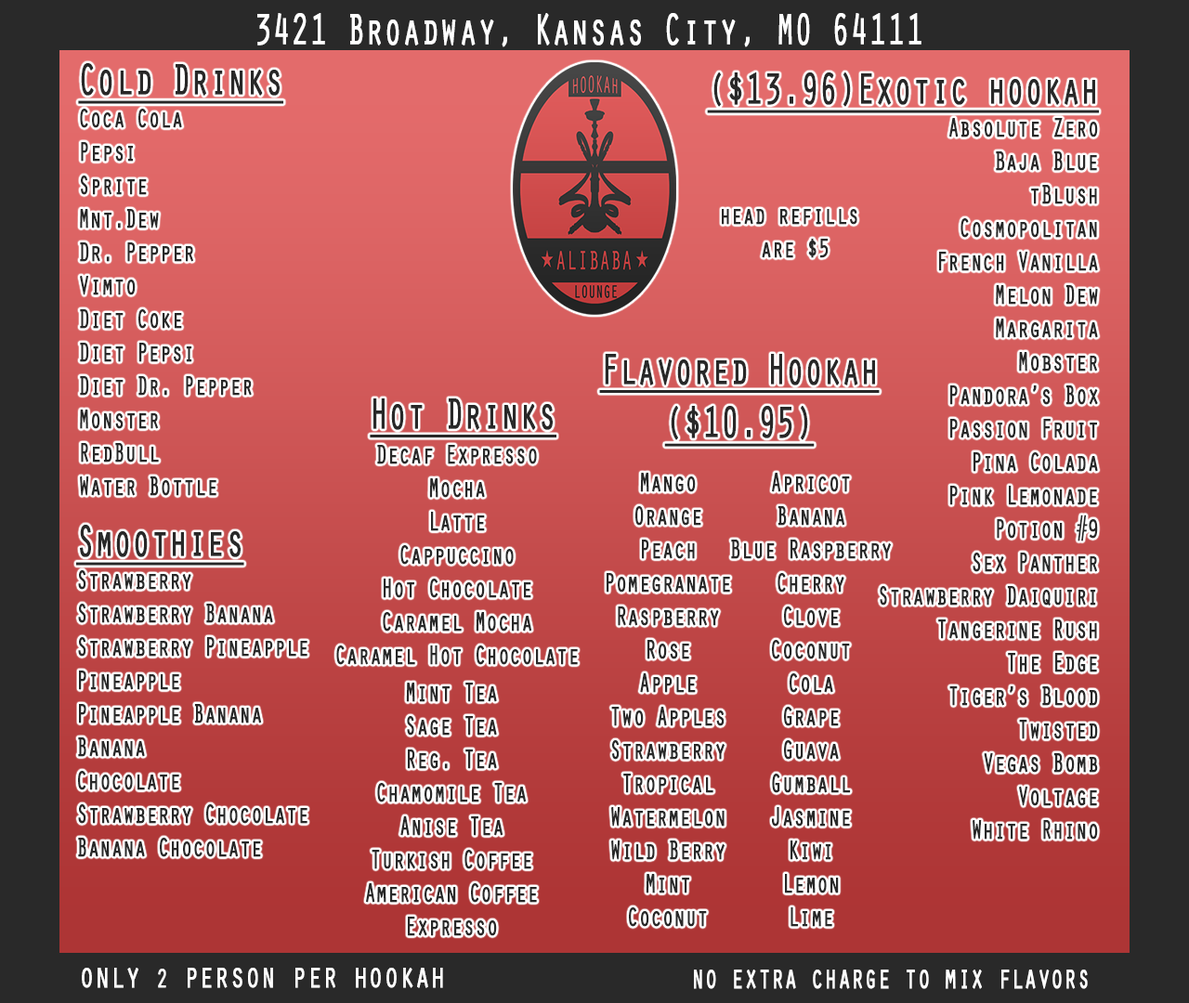
<style>
.page{position:relative;width:1189px;height:1003px}
.page>*{position:absolute;margin:0}
.t1{font:44.6px "OratorStd";color:#ffffff;font-weight:bold;scale:0.67 1}
.t2{font:27.9px "OratorStd";color:#282828;font-weight:bold;scale:0.67 1}
.t3{font:44.6px "OratorStd";color:#282828;font-weight:bold;text-decoration:underline;scale:0.67 1}
.t4{font:36.6px "OratorStd";color:#ffffff;font-weight:bold;scale:0.67 1}
.t5{font:27.9px "OratorStd";color:#ffffff;font-weight:bold;scale:0.67 1}
.t6{font:34.6px "OratorStd";color:#ffffff;font-weight:bold;scale:0.61 1}
</style>
<div class="page">
<p class="t1" style="left:257px;top:13px;width:664px;height:34px">3421 Broadway, Kansas City, MO 64111</p>
<p class="t2" style="left:78px;top:63px;width:206px;height:433px;text-align:right"><span class="t3">Cold Drinks<br></span>Coca Cola<br>Pepsi<br>Sprite<br>Mnt.Dew<br>Dr. Pepper<br>Vimto<br>Diet Coke<br>Diet Pepsi<br>Diet Dr. Pepper<br>Monster<br>RedBull<br>Water Bottle</p>
<p class="t2" style="left:707px;top:72px;width:392px;height:768px"><span class="t3">($13.96)Exotic hookah<br></span>Absolute Zero<br>Baja Blue<br>tBlush<br>Cosmopolitan<br>French Vanilla<br>Melon Dew<br>Margarita<br>Mobster<br>Pandora’s Box<br>Passion Fruit<br>Pina Colada<br>Pink Lemonade<br>Potion #9<br>Sex Panther<br>Strawberry Daiquiri<br>Tangerine Rush<br>The Edge<br>Tiger’s Blood<br>Twisted<br>Vegas Bomb<br>Voltage<br>White Rhino</p>
<p class="t2" style="left:722px;top:209px;width:135px;height:49px;text-align:center">head refills <br>are $5</p>
<p class="t3" style="left:599px;top:354px;width:281px;height:93px;text-align:center">Flavored Hookah<br>($10.95)</p>
<p class="t3" style="left:370px;top:398px;width:186px;height:40px">Hot Drinks</p>
<p class="t2" style="left:336px;top:445px;width:242px;height:220px;text-align:center">Decaf Expresso<br>Mocha<br>Latte<br>Cappuccino<br>Hot Chocolate<br>Caramel Mocha<br>Caramel Hot Chocolate</p>
<p class="t2" style="left:606px;top:473px;width:124px;height:454px;text-align:center">Mango<br>Orange<br>Peach<br>Pomegranate<br>Raspberry<br>Rose<br>Apple<br>Two Apples<br>Strawberry<br>Tropical<br>Watermelon<br>Wild Berry<br>Mint<br>Coconut</p>
<p class="t2" style="left:731px;top:473px;width:160px;height:454px;text-align:center">Apricot<br>Banana<br>Blue Raspberry<br>Cherry<br>Clove<br>Coconut<br>Cola<br>Grape<br>Guava<br>Gumball<br>Jasmine<br>Kiwi<br>Lemon<br>Lime</p>
<p class="t2" style="left:76px;top:525px;width:231px;height:332px;text-align:right"><span class="t3">Smoothies<br></span>Strawberry<br>Strawberry Banana<br>Strawberry Pineapple<br>Pineapple<br>Pineapple Banana<br>Banana<br>Chocolate<br>Strawberry Chocolate<br>Banana Chocolate</p>
<p class="t2" style="left:366px;top:683px;width:171px;height:253px;text-align:center">Mint Tea<br>Sage Tea<br>Reg. Tea<br>Chamomile Tea<br>Anise Tea<br>Turkish Coffee<br>American Coffee<br>Expresso</p>
<p class="t4" style="left:82px;top:968px;width:361px;height:20px">only <span class="t5">2</span> person per hookah</p>
<p class="t6" style="left:694px;top:970px;width:394px;height:19px">no extra charge to mix flavors</p>
</div>
